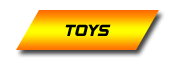
<style>
.page{position:relative;width:170px;height:60px;background:#ffffff}
.page>*{position:absolute;margin:0}
.t1{font:16.9px "Spantaran";color:#000000}
</style>
<div class="page">
<p class="t1" style="left:65px;top:24px;width:46px;height:12px">TOYS</p>
</div>
